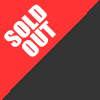
<style>
.page{position:relative;width:100px;height:100px;background:#333333}
.page>*{position:absolute;margin:0}
.t1{font:21.4px/19px "Impact";color:#ffffff;scale:1.13 1}
</style>
<div class="page">
<p class="t1" style="left:4px;top:4px;width:52px;height:53px;text-align:center;rotate:-45deg">SOLD<br>OUT</p>
</div>
